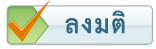
<style>
.page{position:relative;width:156px;height:49px}
.page>*{position:absolute;margin:0}
.t1{font:36px "THSarabunITù-Bold";letter-spacing:0.025em;color:#316982;font-weight:bold}
</style>
<div class="page">
<p class="t1" style="left:65px;top:10px;width:60px;height:24px">ลงมติ</p>
</div>
